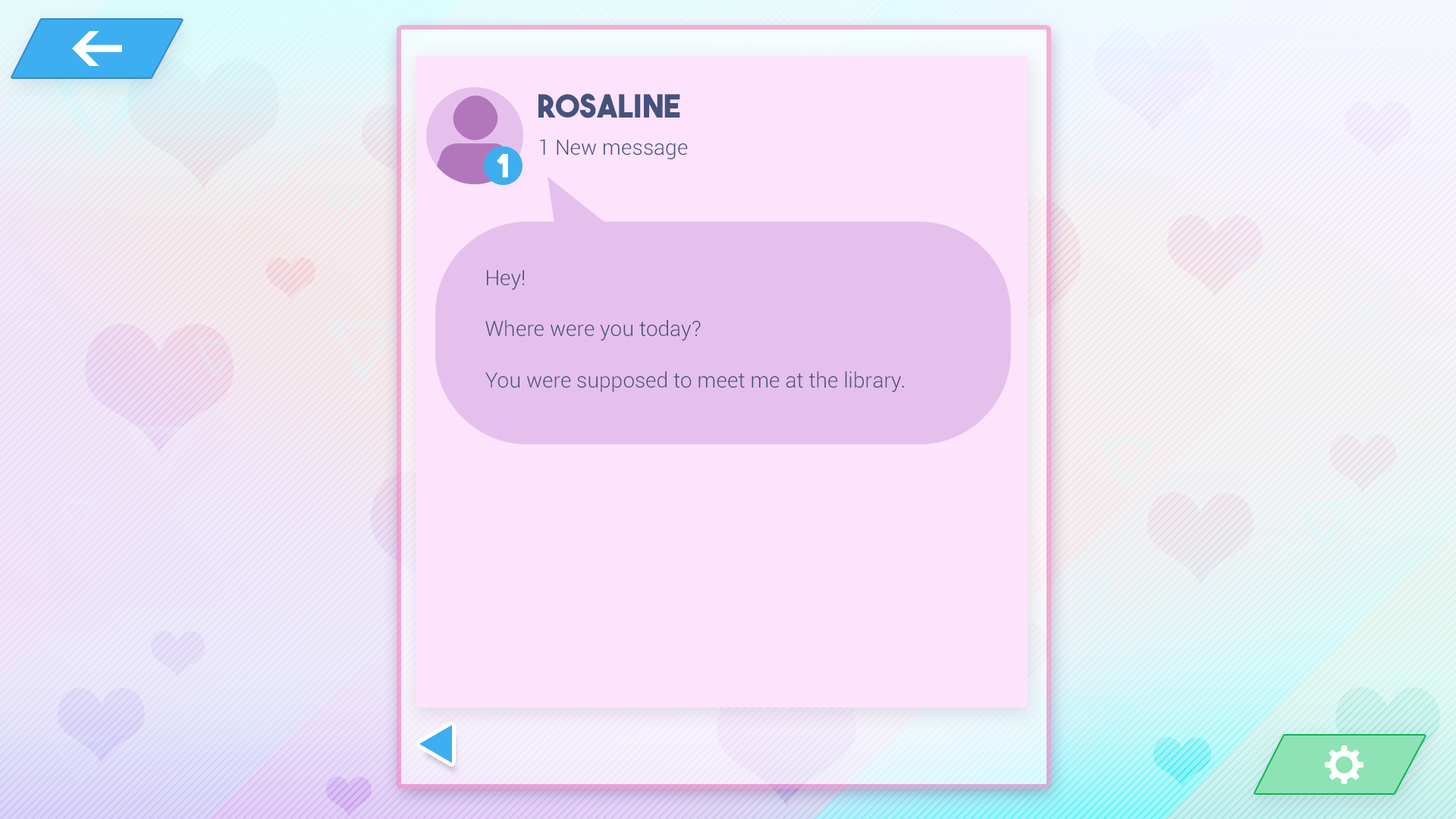
<style>
.page{position:relative;width:1456px;height:819px;background:#fde3fb}
.page>*{position:absolute;margin:0}
.t1{font:31.9px "TheBoldFont";color:#44527d}
.t2{font:21.3px "Roboto-Light";color:#44527d}
.t3{font:31.9px "TheBoldFont";color:#ffffff}
</style>
<div class="page">
<p class="t1" style="left:538px;top:93px;width:142px;height:25px">Rosaline</p>
<p class="t2" style="left:540px;top:140px;width:148px;height:19px">1 New message</p>
<p class="t3" style="left:497px;top:154px;width:11px;height:23px">1</p>
<p class="t2" style="left:485px;top:270px;width:419px;height:122px">Hey! <br><br>Where were you today?<br><br>You were supposed to meet me at the library.</p>
</div>
